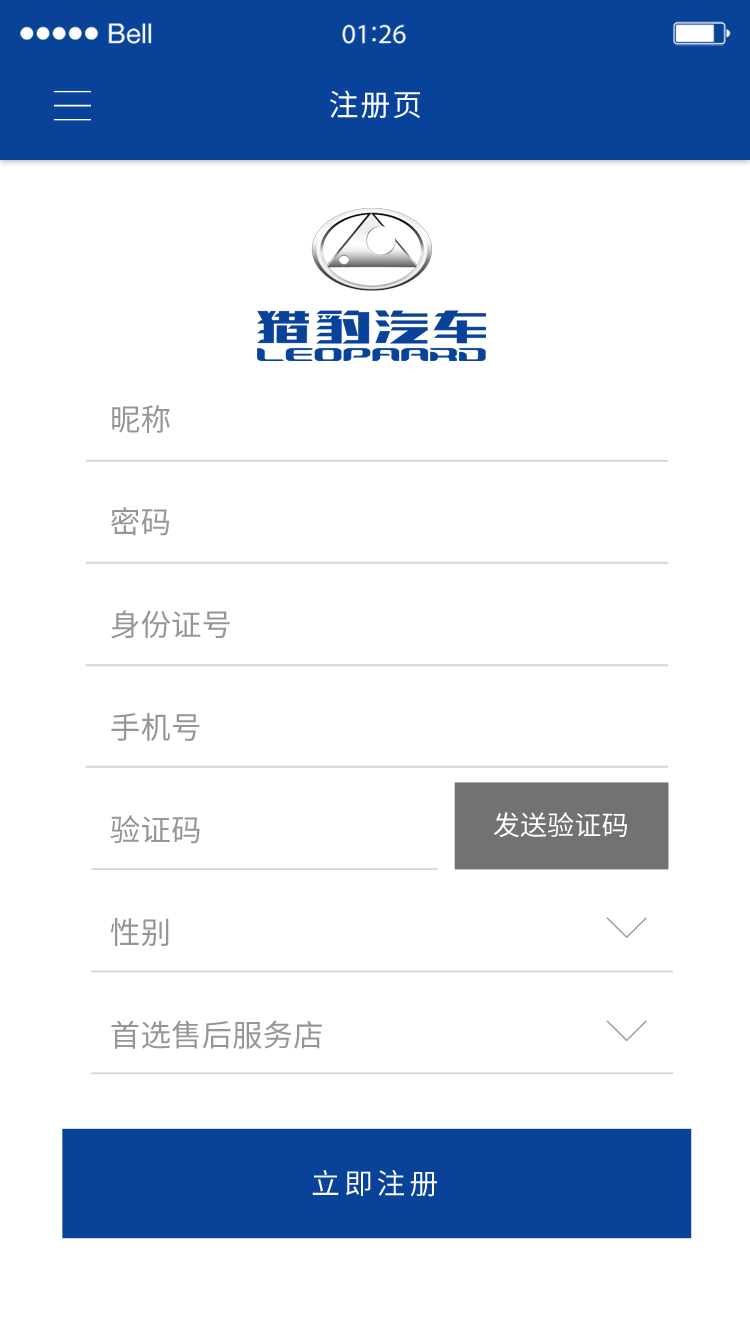
<style>
.page{position:relative;width:750px;height:1334px;background:#ffffff}
.page>*{position:absolute;margin:0}
.t1{font:30px "SourceHanSansCN-Regular";letter-spacing:0.06em;color:#ffffff}
.t2{font:30.5px/102.6px "SourceHanSansCN-Regular";color:#898989}
.t3{font:27.2px "SourceHanSansCN-Regular";color:#ffffff}
.t4{font:28.8px "SourceHanSansCN-Regular";letter-spacing:0.14em;color:#ffffff}
</style>
<div class="page">
<p class="t1" style="left:330px;top:90px;width:90px;height:29px">注册页</p>
<p class="t2" style="left:110px;top:405px;width:212px;height:644px;opacity:0.89">昵称<br>密码<br>身份证号<br>手机号<br>验证码<br>性别<br>首选售后服务店</p>
<p class="t3" style="left:493px;top:812px;width:134px;height:26px">发送验证码</p>
<p class="t4" style="left:312px;top:1170px;width:125px;height:27px">立即注册</p>
</div>
